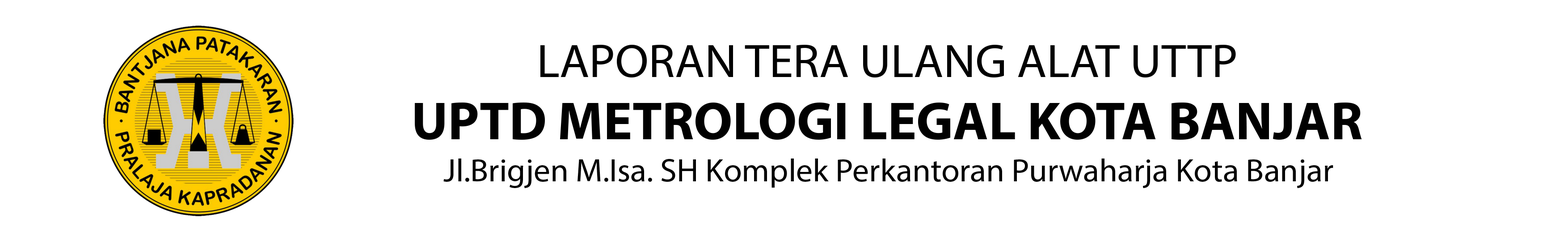
<style>
.page{position:relative;width:1568px;height:240px;background:#ffffff}
.page>*{position:absolute;margin:0}
.t1{font:47.2px "MyriadPro-Regular";color:#010101}
.t2{font:54px "MyriadPro-Bold";color:#010101}
.t3{font:32.3px "MyriadPro-Regular";color:#010101}
</style>
<div class="page">
<p class="t1" style="left:540px;top:44px;width:696px;height:33px">LAPORAN TERA ULANG ALAT UTTP</p>
<p class="t2" style="left:415px;top:102px;width:947px;height:38px">UPTD METROLOGI LEGAL KOTA BANJAR</p>
<p class="t3" style="left:443px;top:158px;width:890px;height:30px">Jl.Brigjen M.Isa. SH Komplek Perkantoran Purwaharja Kota Banjar</p>
</div>
